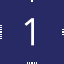
<style>
.page{position:relative;width:64px;height:64px;background:#282a66}
.page>*{position:absolute;margin:0}
.t1{font:38.2px "AvenirNext-Regular";color:#ffffff}
</style>
<div class="page">
<p class="t1" style="left:24px;top:18px;width:10px;height:28px">1</p>
</div>
